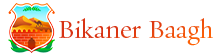
<style>
.page{position:relative;width:216px;height:55px;background:#ffffff}
.page>*{position:absolute;margin:0}
.t1{font:26.7px "RequiemText-HTF-Roman";color:#df3b12}
</style>
<div class="page">
<p class="t1" style="left:59px;top:18px;width:154px;height:28px">Bikaner Baagh</p>
</div>
